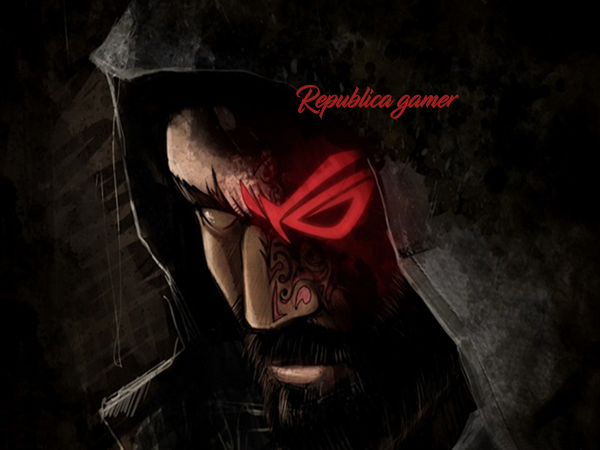
<style>
.page{position:relative;width:600px;height:450px}
.page>*{position:absolute;margin:0}
.t1{font:30.7px "InfiniteStroke-Bolder";color:#9f1d1d;scale:0.81 1}
</style>
<div class="page">
<p class="t1" style="left:296px;top:85px;width:163px;height:34px">Republica gamer</p>
</div>
